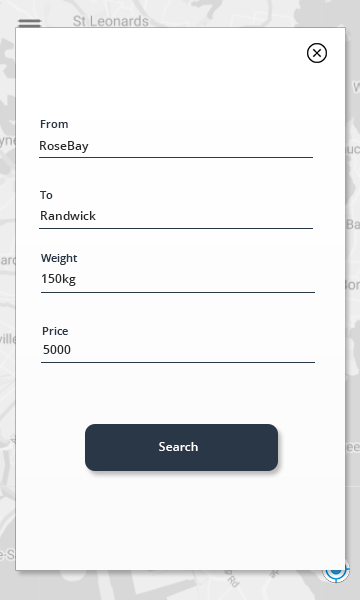
<style>
.page{position:relative;width:360px;height:600px}
.page>*{position:absolute;margin:0}
.t1{font:11px "OpenSans-Semibold";color:#2a3746}
.t2{font:12px "OpenSans-Semibold";color:#282828}
.t3{font:12px "OpenSans-Semibold";color:#fffefe}
</style>
<div class="page">
<p class="t1" style="left:40px;top:120px;width:28px;height:8px">From</p>
<p class="t2" style="left:40px;top:141px;width:49px;height:12px">RoseBay</p>
<p class="t1" style="left:40px;top:191px;width:13px;height:8px">To</p>
<p class="t2" style="left:41px;top:211px;width:55px;height:9px">Randwick</p>
<p class="t1" style="left:41px;top:254px;width:37px;height:11px">Weight</p>
<p class="t2" style="left:42px;top:274px;width:34px;height:12px">150kg</p>
<p class="t1" style="left:42px;top:327px;width:26px;height:8px">Price</p>
<p class="t2" style="left:43px;top:345px;width:28px;height:9px">5000</p>
<p class="t3" style="left:159px;top:442px;width:39px;height:9px">Search</p>
</div>
